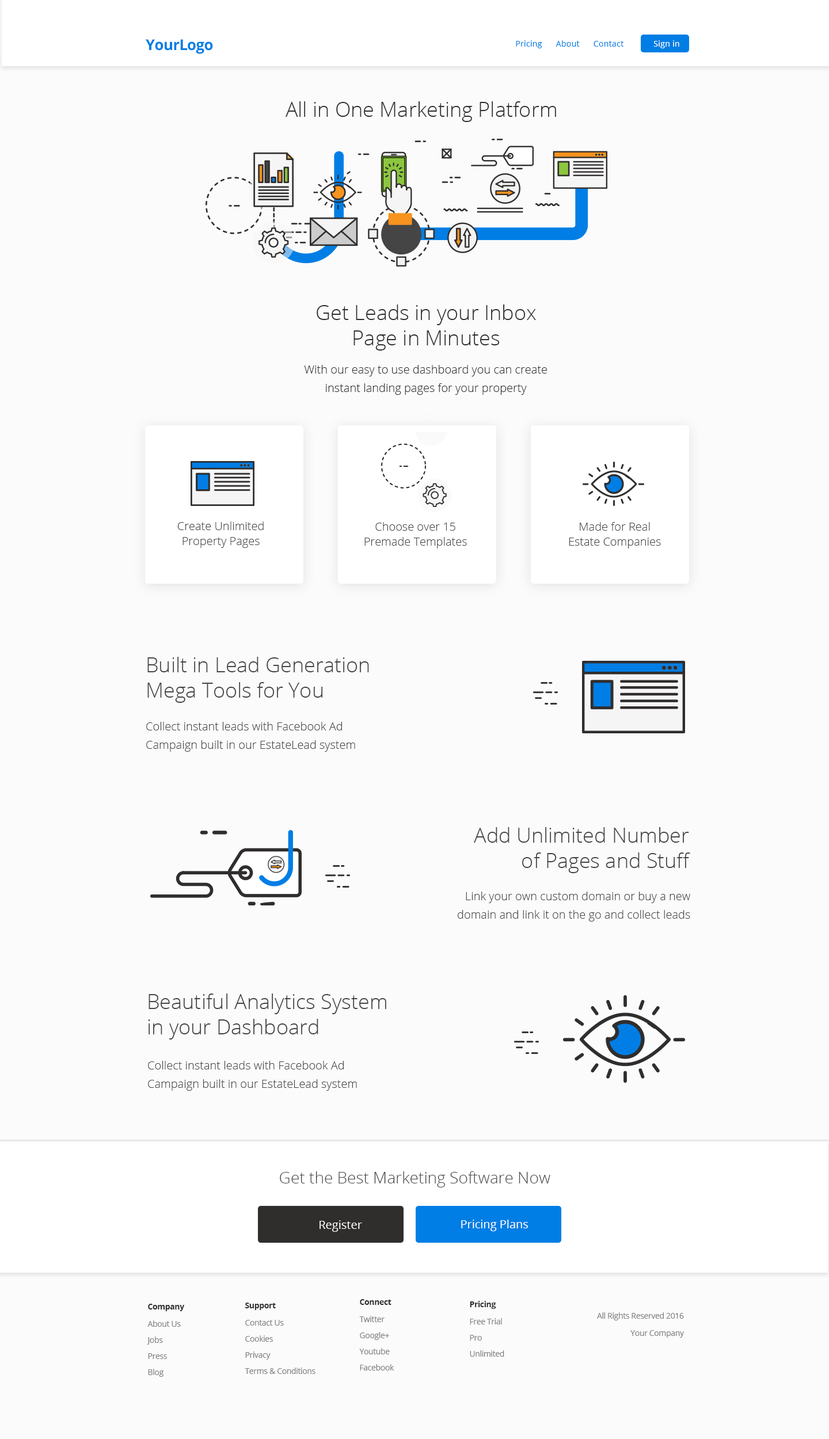
<style>
.page{position:relative;width:829px;height:1439px;background:#fbfbfb}
.page>*{position:absolute;margin:0}
.t1{font:14.9px "OpenSans-Bold";letter-spacing:-0.025em;color:#007ee5}
.t2{font:8.1px "OpenSans";letter-spacing:0.025em;color:#007ee5}
.t3{font:8.1px "OpenSans";letter-spacing:0.025em;color:#ffffff}
.t4{font:20.7px "OpenSans-Light";color:#302d2d}
.t5{font:11.5px/18.4px "OpenSans-Light";color:#302d2d}
.t6{font:11.5px/15px "OpenSans-Light";color:#454545}
.t7{font:20.7px "OpenSans-Light";color:#454545}
.t8{font:11.5px/18.4px "OpenSans-Light";color:#454545}
.t9{font:16.1px "OpenSans-Light";color:#454545}
.t10{font:11.5px "OpenSans";color:#ffffff}
.t11{font:8.1px/16.1px "OpenSans";letter-spacing:-0.025em;color:#818181}
.t12{font:8.1px/17.3px "OpenSans-Bold";letter-spacing:-0.025em;color:#302d2d}
.t13{font:8.1px/17.3px "OpenSans";letter-spacing:-0.025em;color:#818181}
</style>
<div class="page">
<p class="t1" style="left:146px;top:39px;width:67px;height:15px">YourLogo</p>
<p class="t2" style="left:516px;top:40px;width:163px;height:8px">Pricing      About      Contact          <span class="t3">   Sign in</span></p>
<p class="t4" style="left:285px;top:101px;width:271px;height:21px">All in One Marketing Platform</p>
<p class="t4" style="left:317px;top:304px;width:219px;height:46px;text-align:center">Get Leads in your Inbox<br>Page in Minutes</p>
<p class="t5" style="left:304px;top:365px;width:243px;height:30px;text-align:center">With our easy to use dashboard you can create<br>instant landing pages for your property</p>
<p class="t6" style="left:177px;top:521px;width:87px;height:27px;text-align:center">Create Unlimited <br>Property Pages</p>
<p class="t6" style="left:364px;top:522px;width:103px;height:26px;text-align:center">Choose over 15<br>Premade Templates</p>
<p class="t6" style="left:569px;top:522px;width:92px;height:26px;text-align:center">Made for Real<br>Estate Companies</p>
<p class="t7" style="left:147px;top:657px;width:222px;height:46px">Built in Lead Generation<br>Mega Tools for You</p>
<p class="t8" style="left:146px;top:722px;width:209px;height:30px">Collect instant leads with Facebook Ad<br>Campaign built in our EstateLead system</p>
<p class="t7" style="left:474px;top:827px;width:216px;height:46px;text-align:right">Add Unlimited Number<br>of Pages and Stuff</p>
<p class="t8" style="left:458px;top:891px;width:232px;height:30px;text-align:right">Link your own custom domain or buy a new<br>domain and link it on the go and collect leads</p>
<p class="t7" style="left:148px;top:993px;width:238px;height:46px">Beautiful Analytics System<br>in your Dashboard</p>
<p class="t8" style="left:148px;top:1061px;width:209px;height:30px">Collect instant leads with Facebook Ad<br>Campaign built in our EstateLead system</p>
<p class="t9" style="left:280px;top:1171px;width:270px;height:16px">Get the Best Marketing Software Now</p>
<p class="t10" style="left:319px;top:1220px;width:43px;height:12px">Register</p>
<p class="t10" style="left:461px;top:1220px;width:67px;height:11px">Pricing Plans</p>
<p class="t11" style="left:359px;top:1299px;width:35px;height:71px"><span class="t12">Connect<br></span><span class="t13">Twitter<br></span>Google+<br>Youtube<br>Facebook</p>
<p class="t11" style="left:470px;top:1301px;width:34px;height:56px"><span class="t12">Pricing<br></span><span class="t13">Free Trial<br></span>Pro<br>Unlimited</p>
<p class="t11" style="left:147px;top:1304px;width:38px;height:73px"><span class="t12">Company<br></span><span class="t13">About Us<br></span>Jobs<br>Press<br>Blog</p>
<p class="t11" style="left:245px;top:1302px;width:70px;height:72px"><span class="t12">Support<br></span><span class="t13">Contact Us<br></span>Cookies<br>Privacy<br>Terms &amp; Conditions</p>
<p class="t13" style="left:597px;top:1312px;width:87px;height:26px;text-align:right">All Rights Reserved 2016 <br>   Your Company</p>
</div>
